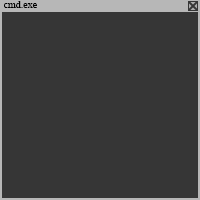
<style>
.page{position:relative;width:200px;height:200px;background:#363636}
.page>*{position:absolute;margin:0}
.t1{font:10px "TimesNewRomanPSMT";color:#000000}
</style>
<div class="page">
<p class="t1" style="left:4px;top:1px;width:33px;height:7px">cmd.exe</p>
</div>
